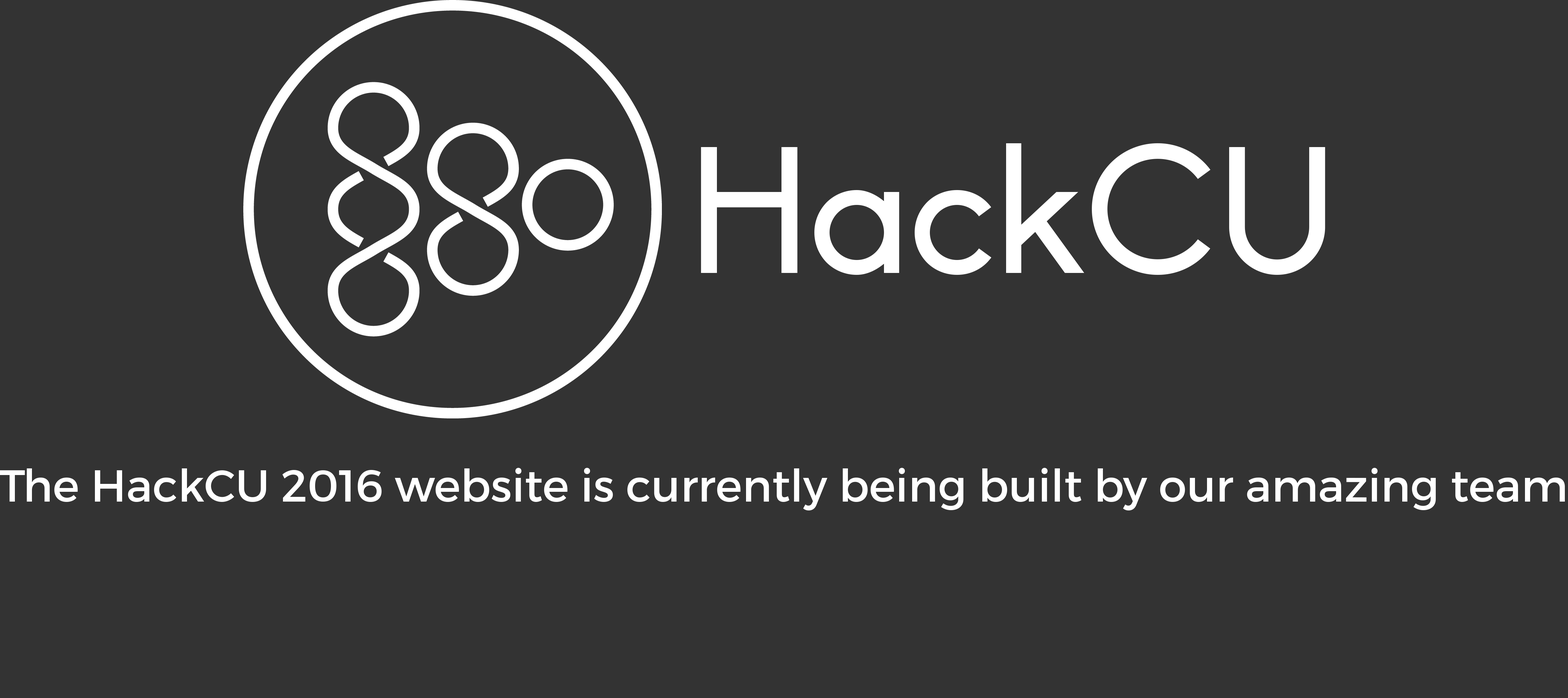
<style>
.page{position:relative;width:1568px;height:698px;background:#333333}
.page>*{position:absolute;margin:0}
.t1{font:44.8px "Montserrat-Regular";color:#ffffff}
</style>
<div class="page">
<p class="t1" style="left:0px;top:468px;width:1565px;height:43px">The HackCU 2016 website is currently being built by our amazing team</p>
</div>
